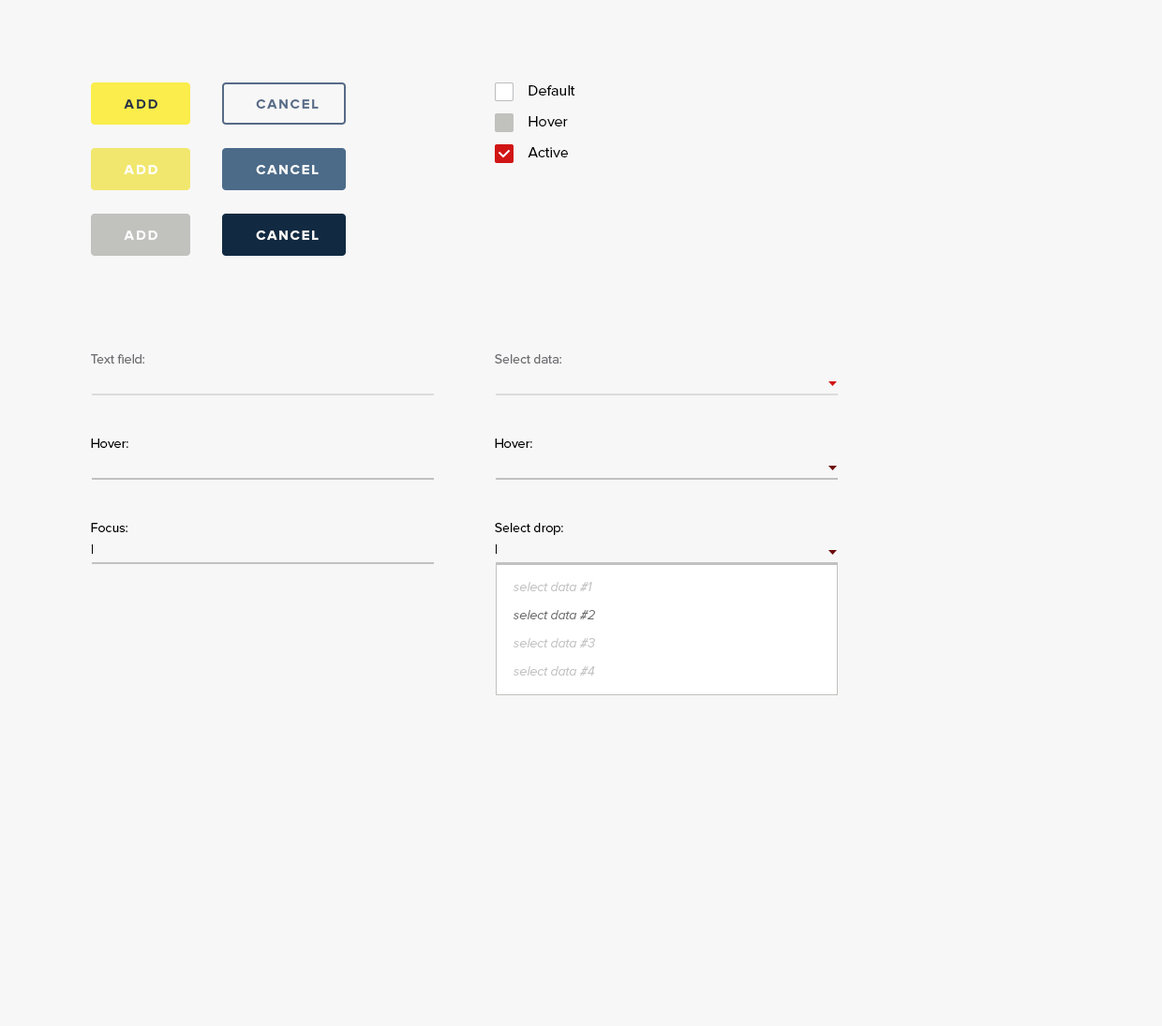
<style>
.page{position:relative;width:1162px;height:1026px;background:#f7f7f7}
.page>*{position:absolute;margin:0}
.t1{font:15px "ProximaNova-Regular";color:#000000}
.t2{font:14.1px "ProximaNova-Bold";letter-spacing:0.12em;color:#253244;text-transform:uppercase}
.t3{font:14.1px "ProximaNova-Bold";letter-spacing:0.12em;color:#576b87;text-transform:uppercase}
.t4{font:14.1px "ProximaNova-Bold";letter-spacing:0.12em;color:#ffffff;text-transform:uppercase}
.t5{font:13.1px "ProximaNova-Regular";color:#6d6e71}
.t6{font:13.1px "ProximaNova-Regular";color:#000000}
.t7{font:13.1px "ProximaNova-LightIt";color:#c2c2c2}
.t8{font:13.1px "ProximaNova-LightIt";color:#6a6a6a}
</style>
<div class="page">
<p class="t1" style="left:529px;top:85px;width:46px;height:11px">Default</p>
<p class="t2" style="left:124px;top:99px;width:33px;height:10px">Add</p>
<p class="t3" style="left:256px;top:99px;width:63px;height:10px">Cancel</p>
<p class="t1" style="left:529px;top:116px;width:39px;height:11px">Hover</p>
<p class="t1" style="left:528px;top:147px;width:40px;height:10px">Active</p>
<p class="t4" style="left:124px;top:165px;width:33px;height:9px">Add</p>
<p class="t4" style="left:256px;top:165px;width:63px;height:9px">Cancel</p>
<p class="t4" style="left:124px;top:231px;width:33px;height:9px">Add</p>
<p class="t4" style="left:256px;top:231px;width:63px;height:9px">Cancel</p>
<p class="t5" style="left:91px;top:354px;width:53px;height:10px">Text field:</p>
<p class="t5" style="left:495px;top:354px;width:66px;height:10px">Select data:</p>
<p class="t6" style="left:91px;top:439px;width:37px;height:9px">Hover:</p>
<p class="t6" style="left:495px;top:439px;width:37px;height:9px">Hover:</p>
<p class="t6" style="left:91px;top:523px;width:36px;height:9px">Focus:</p>
<p class="t6" style="left:495px;top:523px;width:68px;height:12px">Select drop:</p>
<p class="t6" style="left:92px;top:544px;width:1px;height:11px">|</p>
<p class="t6" style="left:496px;top:544px;width:1px;height:11px">|</p>
<p class="t7" style="left:513px;top:582px;width:79px;height:9px">select data #1</p>
<p class="t8" style="left:513px;top:610px;width:82px;height:9px">select data #2</p>
<p class="t7" style="left:513px;top:638px;width:82px;height:10px">select data #3</p>
<p class="t7" style="left:513px;top:666px;width:82px;height:10px">select data #4</p>
</div>
